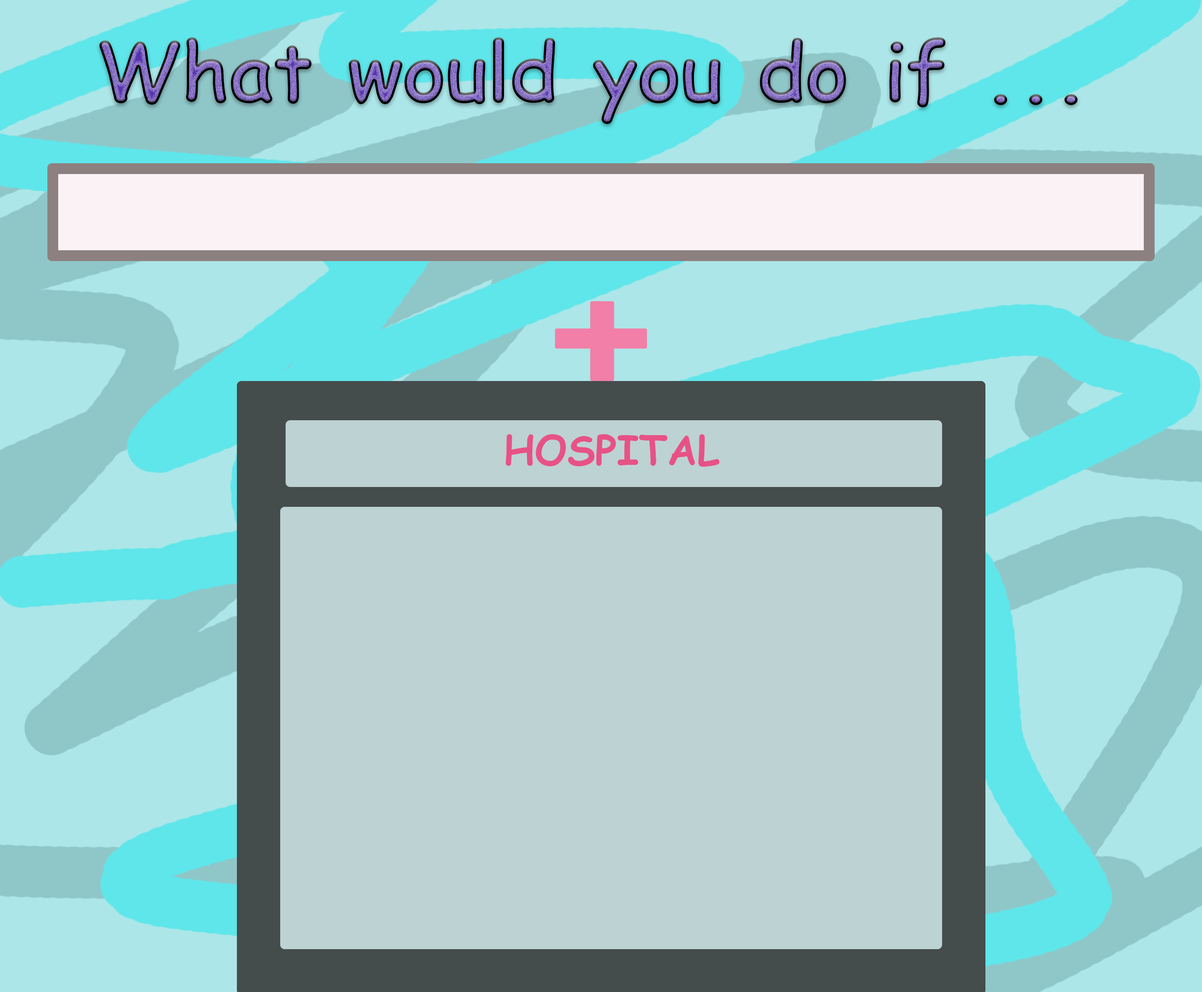
<style>
.page{position:relative;width:1202px;height:992px;background:#bdd2d3}
.page>*{position:absolute;margin:0}
.t1{font:81.2px "ComicSansMS-Bold"}
.t2{font:40.6px "ComicSansMS-Bold";color:#e75286}
</style>
<div class="page">
<p class="t1" style="left:99px;top:37px;width:979px;height:87px">What would you do if ...</p>
<p class="t2" style="left:505px;top:434px;width:214px;height:33px">HOSPITAL</p>
</div>
